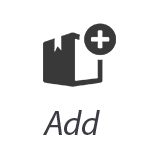
<style>
.page{position:relative;width:142px;height:142px;background:#ffffff}
.page>*{position:absolute;margin:0}
.t1{font:35px "MyriadPro-It";color:#3b3b44}
</style>
<div class="page">
<p class="t1" style="left:43px;top:110px;width:57px;height:25px">Add</p>
</div>
